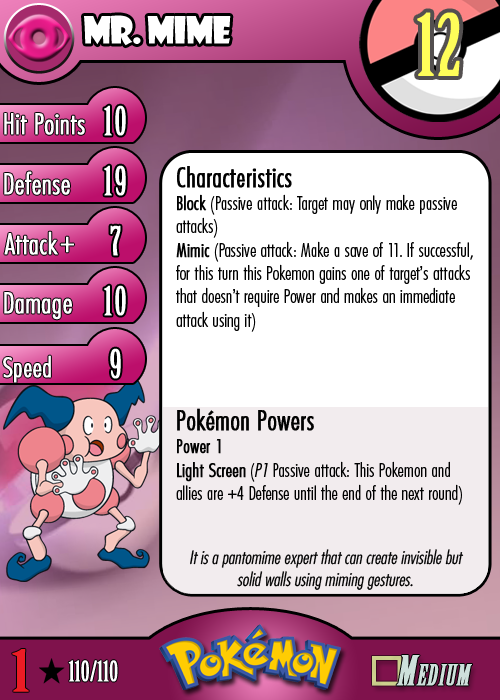
<style>
.page{position:relative;width:500px;height:700px;background:#ffffff}
.page>*{position:absolute;margin:0}
.t1{font:36.7px "ShowcardGothic-Reg";letter-spacing:-0.025em;color:#ffffff;scale:0.91 1}
.t2{font:83.3px "BirchStd";letter-spacing:0.025em;color:#fffd59;font-weight:bold}
.t3{font:27.8px "Futura-CondensedLight";color:#ffffff;font-weight:bold}
.t4{font:38.9px "BirchStd";letter-spacing:0.035em;color:#ffffff;font-weight:bold}
.t5{font:19.4px "FuturaCondensedBQ-Light";color:#010101}
.t6{font:27.8px "FuturaCondensedBQ-Light";color:#010101;font-weight:bold}
.t7{font:19.4px "FuturaCondensedBQ-Light";color:#010101;font-weight:bold}
.t8{font:19.4px "FuturaCondensedBQ-Light";color:#010101;font-style:italic}
.t9{font:30.6px "Futura-CondensedLight";color:#ffffff;font-weight:bold}
.t10{font:27.8px "FuturaCondensedBQ-Light";color:#ffffff;font-weight:bold}
.t11{font:18.1px "Futura-CondensedLight";color:#010101;font-style:italic}
.t12{font:55.6px "BirchStd";color:#ed1c24;font-weight:bold;scale:1.5 1}
.t13{font:27.8px "BirchStd";color:#ffffff;font-weight:bold}
</style>
<div class="page">
<p class="t1" style="left:84px;top:15px;width:147px;height:31px">mr. mime</p>
<p class="t2" style="left:417px;top:12px;width:43px;height:64px">12</p>
<p class="t3" style="left:4px;top:113px;width:81px;height:22px">Hit Points</p>
<p class="t4" style="left:104px;top:105px;width:22px;height:31px">10</p>
<p class="t3" style="left:4px;top:171px;width:66px;height:24px">Defense</p>
<p class="t4" style="left:104px;top:165px;width:22px;height:31px">19</p>
<p class="t5" style="left:176px;top:166px;width:297px;height:339px"><span class="t6">Characteristics<br></span><span class="t7">Block</span> (Passive attack: Target may only make passive attacks)<br><span class="t7">Mimic</span> (Passive attack: Make a save of 11. If successful, for this turn this Pokemon gains one of target’s attacks that doesn’t require Power and makes an immediate attack using it)<br><br><br><br><span class="t6">Pokémon Powers<br></span><span class="t7">Power 1<br>Light Screen</span> (<span class="t8">P1</span> Passive attack: This Pokemon and  allies are +4 Defense until the end of the next round)</p>
<p class="t3" style="left:4px;top:231px;width:54px;height:24px">Attack</p>
<p class="t4" style="left:110px;top:225px;width:11px;height:31px">7</p>
<p class="t9" style="left:60px;top:236px;width:14px;height:17px">+</p>
<p class="t3" style="left:4px;top:292px;width:68px;height:28px">Damage</p>
<p class="t4" style="left:104px;top:285px;width:22px;height:31px">10</p>
<p class="t4" style="left:110px;top:348px;width:11px;height:31px">9</p>
<p class="t10" style="left:3px;top:355px;width:48px;height:28px">Speed</p>
<p class="t11" style="left:190px;top:549px;width:274px;height:41px;text-align:center">It is a pantomime expert that can create invisible but solid walls using miming gestures.</p>
<p class="t12" style="left:12px;top:649px;width:17px;height:43px">1</p>
<p class="t13" style="left:68px;top:660px;width:50px;height:22px">110/110</p>
</div>
